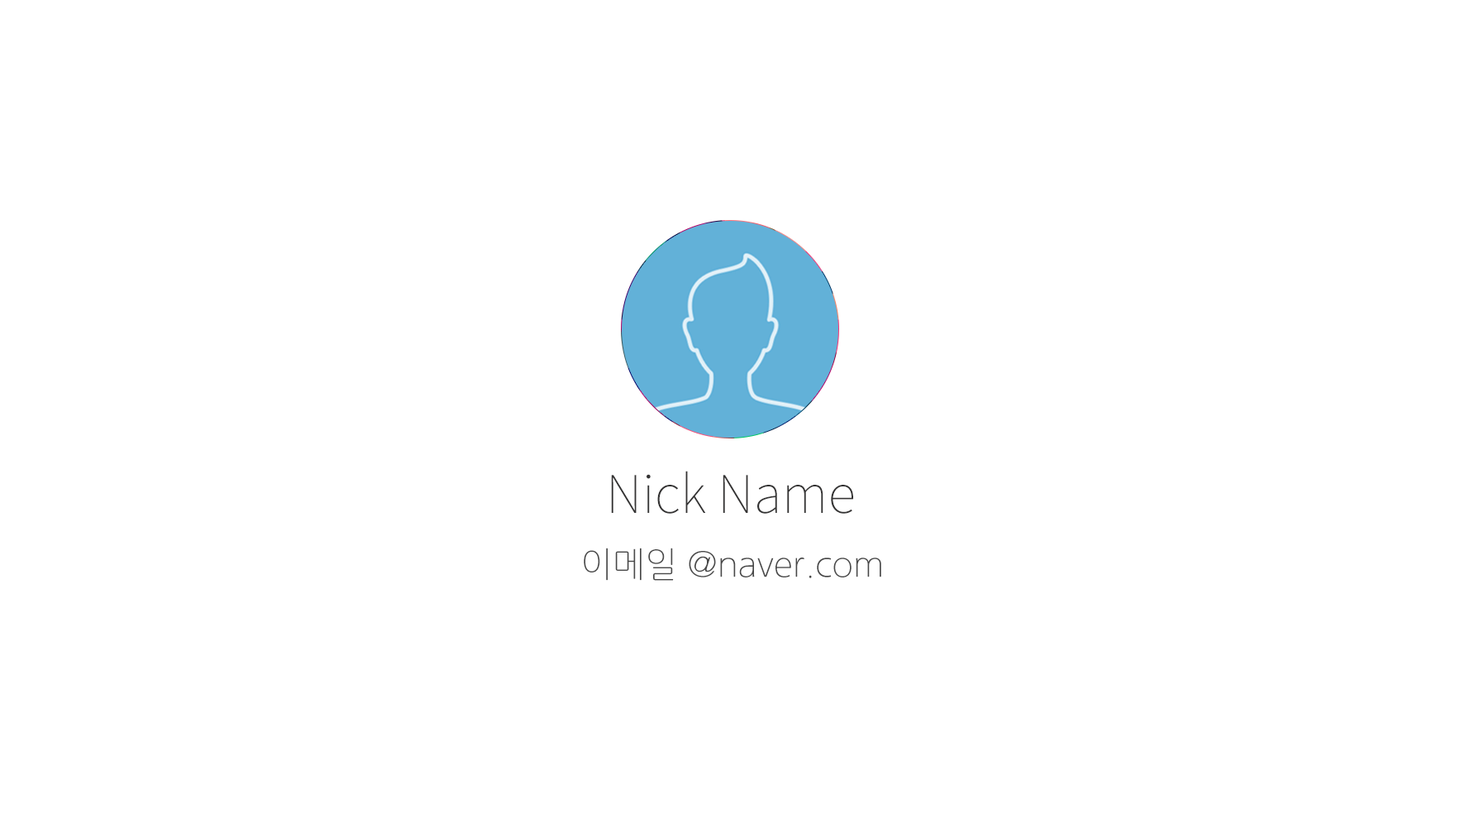
<style>
.page{position:relative;width:1465px;height:814px;background:#ffffff}
.page>*{position:absolute;margin:0}
.t1{font:57.4px "SourceSansPro-ExtraLight";color:#343333}
.t2{font:34.5px "NanumGothicLight";color:#484848}
</style>
<div class="page">
<p class="t1" style="left:611px;top:471px;width:242px;height:43px">Nick Name</p>
<p class="t2" style="left:584px;top:547px;width:298px;height:34px">이메일 @naver.com</p>
</div>
